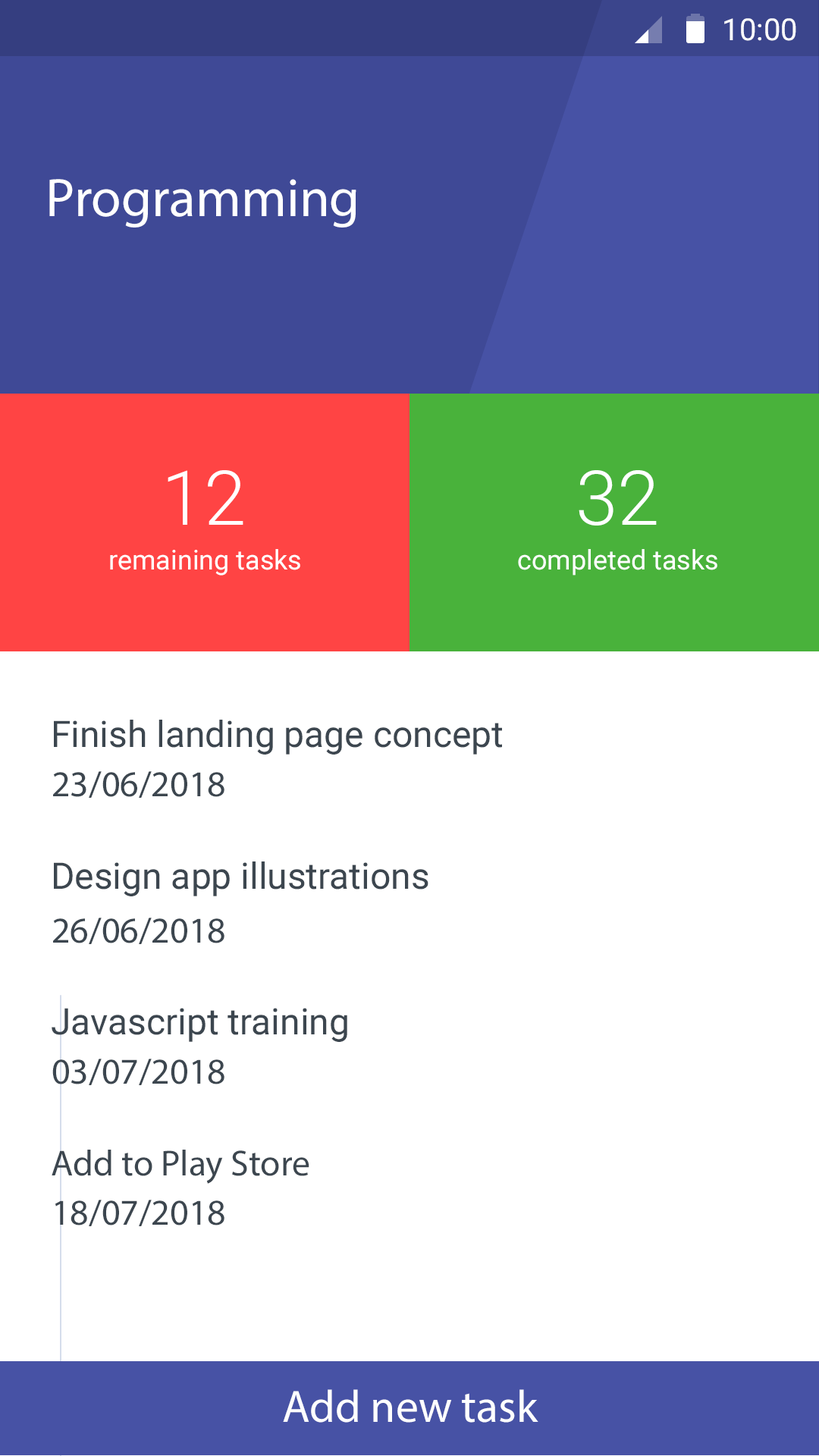
<style>
.page{position:relative;width:819px;height:1456px;background:#ffffff}
.page>*{position:absolute;margin:0}
.t1{font:30.3px "Roboto-Regular";color:#ffffff}
.t2{font:54.6px "MyriadPro-Regular";color:#ffffff}
.t3{font:75.8px "Roboto-Light";color:#ffffff}
.t4{font:27.3px "Roboto-Regular";color:#ffffff}
.t5{font:36.4px "Roboto-Regular";color:#3c464f}
.t6{font:36.4px "MyriadPro-Regular";color:#3c464f}
.t7{font:45.5px "MyriadPro-Regular";color:#fefefe}
</style>
<div class="page">
<p class="t1" style="left:724px;top:18px;width:72px;height:23px">10:00</p>
<p class="t2" style="left:49px;top:179px;width:307px;height:48px">Programming</p>
<p class="t3" style="left:168px;top:470px;width:75px;height:55px">12</p>
<p class="t3" style="left:579px;top:470px;width:78px;height:56px">32</p>
<p class="t4" style="left:110px;top:549px;width:190px;height:27px">remaining tasks</p>
<p class="t4" style="left:518px;top:549px;width:199px;height:27px">completed tasks</p>
<p class="t5" style="left:54px;top:720px;width:448px;height:35px">Finish landing page concept</p>
<p class="t6" style="left:53px;top:771px;width:171px;height:27px">23/06/2018</p>
<p class="t5" style="left:54px;top:861px;width:374px;height:35px">Design app illustrations</p>
<p class="t6" style="left:53px;top:918px;width:171px;height:26px">26/06/2018</p>
<p class="t5" style="left:52px;top:1008px;width:295px;height:34px">Javascript training</p>
<p class="t6" style="left:52px;top:1059px;width:172px;height:26px">03/07/2018</p>
<p class="t6" style="left:52px;top:1150px;width:257px;height:34px">Add to Play Store</p>
<p class="t6" style="left:55px;top:1200px;width:169px;height:26px">18/07/2018</p>
<p class="t7" style="left:283px;top:1389px;width:255px;height:34px">Add new task</p>
</div>
